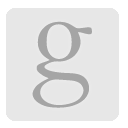
<style>
.page{position:relative;width:128px;height:128px;background:#e7e7e7}
.page>*{position:absolute;margin:0}
.t1{font:130px "Garamond";color:#a5a5a5}
</style>
<div class="page">
<p class="t1" style="left:32px;top:21px;width:60px;height:87px">g</p>
</div>
